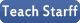
<style>
.page{position:relative;width:80px;height:23px}
.page>*{position:absolute;margin:0}
.t1{font:16.8px "EstrangeloEdessa";letter-spacing:0.025em;color:#ffffff;scale:0.88 1}
</style>
<div class="page">
<p class="t1" style="left:2px;top:5px;width:76px;height:12px">Teach Starff</p>
</div>
